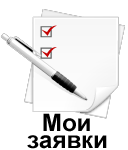
<style>
.page{position:relative;width:128px;height:150px;background:#ffffff}
.page>*{position:absolute;margin:0}
.t1{font:24px "Arial-BoldMT";color:#000000}
</style>
<div class="page">
<p class="t1" style="left:43px;top:113px;width:47px;height:19px">Мои</p>
<p class="t1" style="left:27px;top:135px;width:80px;height:14px">заявки</p>
</div>
